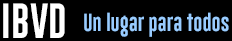
<style>
.page{position:relative;width:232px;height:41px;background:#000000}
.page>*{position:absolute;margin:0}
.t1{font:36px "GoboldLowplus";color:#ffffff}
.t2{font:18px "GoboldLowplus";color:#99ccff}
</style>
<div class="page">
<p class="t1" style="left:3px;top:3px;width:62px;height:35px">IBVD</p>
<p class="t2" style="left:84px;top:12px;width:145px;height:25px">Un lugar para todos</p>
</div>
